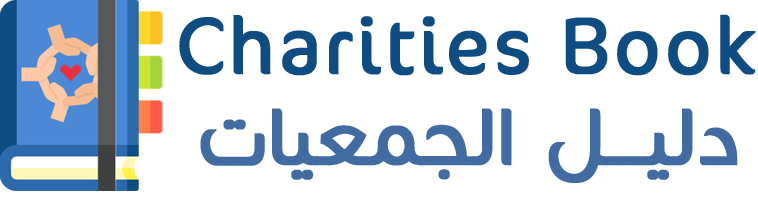
<style>
.page{position:relative;width:758px;height:200px;background:#ffffff}
.page>*{position:absolute;margin:0}
.t1{font:91.7px "CoconNextArabic-Light";color:#0f4c81;font-weight:bold}
.t2{font:91.7px "CoconNextArabic-Light";color:#426ca1;font-weight:bold}
</style>
<div class="page">
<p class="t1" style="left:179px;top:14px;width:577px;height:62px">Charities Book</p>
<p class="t2" style="left:200px;top:108px;width:538px;height:75px">دليـــل الجمعيات</p>
</div>
